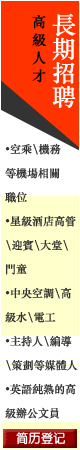
<style>
.page{position:relative;width:80px;height:450px;background:#ffffff}
.page>*{position:absolute;margin:0}
.t1{font:14px/18px "STZhongsong";color:#040400}
.t2{font:24px/24px "STZhongsong";color:#ffffff}
.t3{font:24px/24px "NSimSun";color:#ff0000}
.t4{font:11px/24px "STZhongsong";color:#333333}
</style>
<div class="page">
<p class="t1" style="left:32px;top:15px;width:14px;height:68px;text-align:right">高<br>級<br>人<br>才</p>
<p class="t2" style="left:52px;top:13px;width:24px;height:95px;text-align:right"><span class="t3"><br></span>長<br>期<br>招<br>聘</p>
<p class="t4" style="left:5px;top:143px;width:73px;height:276px">•空乘\機務<br>等機場相關<br>職位<br>•星級酒店高管<br>\迎賓\大堂\<br>門童<br>•中央空調\高<br>級水\電工<br>•主持人\編導<br>\策劃等媒體人<br>•英語純熟的高<br>級辦公文員</p>
</div>
